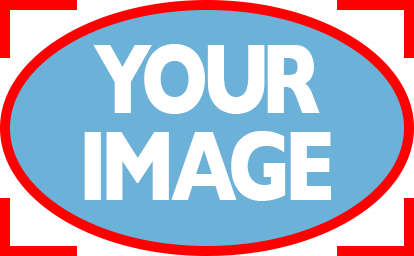
<style>
.page{position:relative;width:414px;height:256px;background:#6cb1d8}
.page>*{position:absolute;margin:0}
.t1{font:100px/87px "GillSans-Bold";letter-spacing:-0.075em;color:#ffffff;scale:0.79 1}
.t2{font:100px/87px "GillSans-Bold";letter-spacing:-0.05em;color:#ffffff;scale:0.79 1}
.t3{font:100px/87px "GillSans-Bold";letter-spacing:-0.1em;color:#ffffff;scale:0.79 1}
</style>
<div class="page">
<p class="t1" style="left:84px;top:44px;width:247px;height:157px;text-align:center">Y<span class="t2">O</span><span class="t3">U</span>R<br>I<span class="t2">MA</span>GE</p>
</div>
